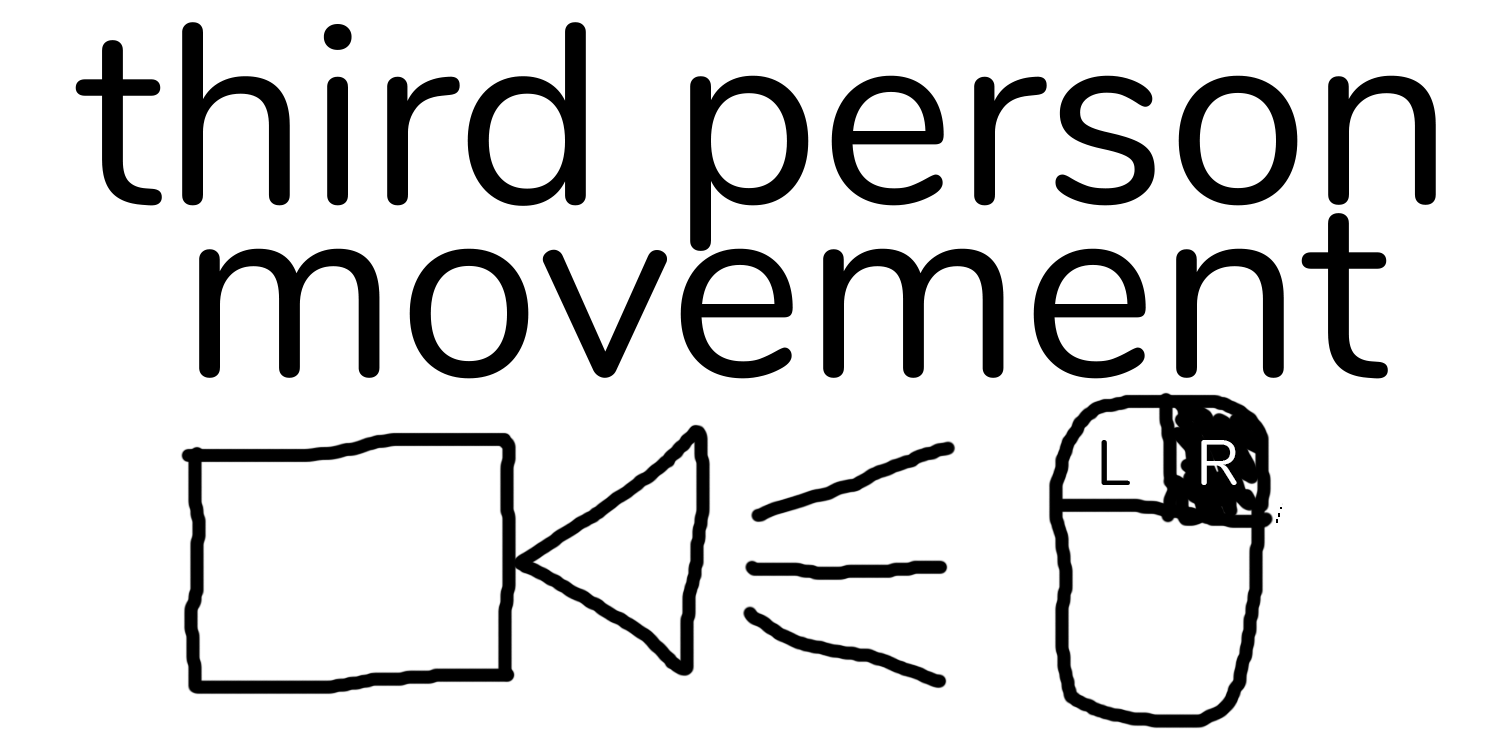
<style>
.page{position:relative;width:1500px;height:755px;background:#ffffff}
.page>*{position:absolute;margin:0}
.t1{font:256px "Nunito-Regular";color:#000000}
.t2{font:64px "Nunito-Regular";color:#000000}
.t3{font:64px "Nunito-Regular";color:#ffffff}
</style>
<div class="page">
<p class="t1" style="left:75px;top:22px;width:1361px;height:229px">third person</p>
<p class="t1" style="left:199px;top:213px;width:1189px;height:166px">movement</p>
<p class="t2" style="left:1101px;top:440px;width:29px;height:45px">L</p>
<p class="t3" style="left:1201px;top:440px;width:36px;height:45px">R</p>
</div>
